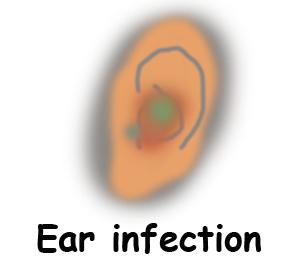
<style>
.page{position:relative;width:298px;height:277px;background:#ffffff}
.page>*{position:absolute;margin:0}
.t1{font:36px "ComicSansMS-Bold";color:#030303}
</style>
<div class="page">
<p class="t1" style="left:37px;top:223px;width:224px;height:31px">Ear infection</p>
</div>
